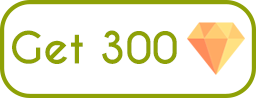
<style>
.page{position:relative;width:256px;height:98px;background:#ffffff}
.page>*{position:absolute;margin:0}
.t1{font:41.7px "CaviarDreams-Bold";color:#8ea106}
</style>
<div class="page">
<p class="t1" style="left:12px;top:30px;width:165px;height:34px">Get 300</p>
</div>
